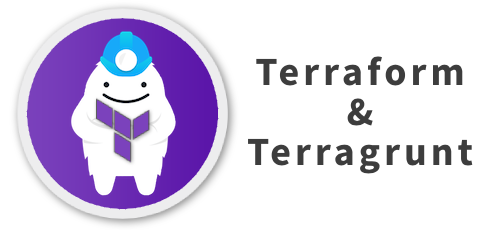
<style>
.page{position:relative;width:500px;height:230px;background:#ffffff}
.page>*{position:absolute;margin:0}
.t1{font:40px "SourceSansPro-Bold";letter-spacing:0.1em;color:#3d3d3d}
</style>
<div class="page">
<p class="t1" style="left:248px;top:56px;width:225px;height:118px;text-align:center">Terraform<br>&amp;<br>Terragrunt</p>
</div>
